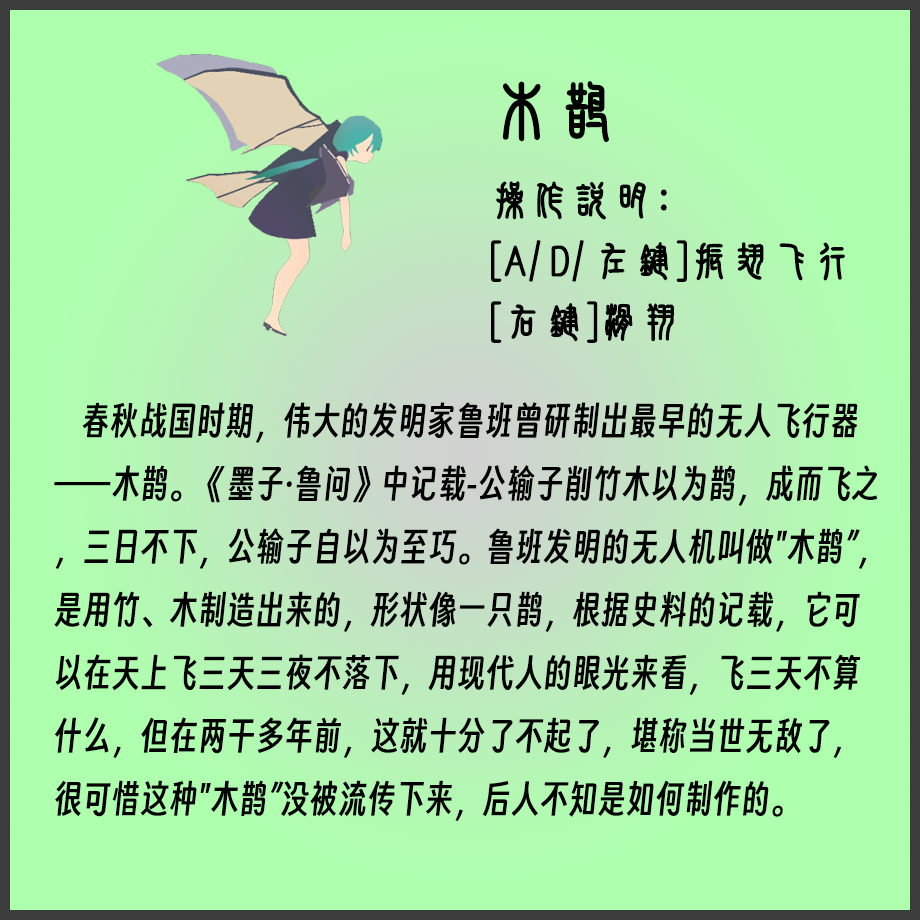
<style>
.page{position:relative;width:920px;height:920px;background:#aeffae}
.page>*{position:absolute;margin:0}
.t1{font:64px "SJxiaozhuanjian-Regular";color:#000000;font-weight:bold}
.t2{font:40px/61px "SJxiaozhuanjian-Regular";color:#000000;font-weight:bold}
.t3{font:36px "SmileySans-Oblique";color:#000000}
</style>
<div class="page">
<p class="t1" style="left:502px;top:81px;width:107px;height:61px">木鹊</p>
<p class="t2" style="left:491px;top:181px;width:354px;height:162px">操作说明：<br>[A/D/左键]振翅飞行<br>[右键]滑翔</p>
<p class="t3" style="left:54px;top:402px;width:824px;height:419px">春秋战国时期，伟大的发明家鲁班曾研制出最早的无人飞行器——木鹊。《墨子·鲁问》中记载-公输子削竹木以为鹊，成而飞之，三日不下，公输子自以为至巧。鲁班发明的无人机叫做"木鹊”，是用竹、木制造出来的，形状像一只鹊，根据史料的记载，它可以在天上飞三天三夜不落下，用现代人的眼光来看，飞三天不算什么，但在两干多年前，这就十分了不起了，堪称当世无敌了，很可惜这种"木鹊”没被流传下来，后人不知是如何制作的。</p>
</div>
